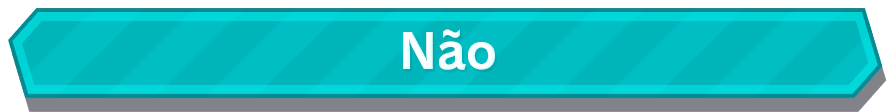
<style>
.page{position:relative;width:891px;height:112px;background:#00bec4}
.page>*{position:absolute;margin:0}
.t1{font:48px "RodinPro-B";color:#fffeff}
</style>
<div class="page">
<p class="t1" style="left:403px;top:29px;width:92px;height:41px">Não</p>
</div>
